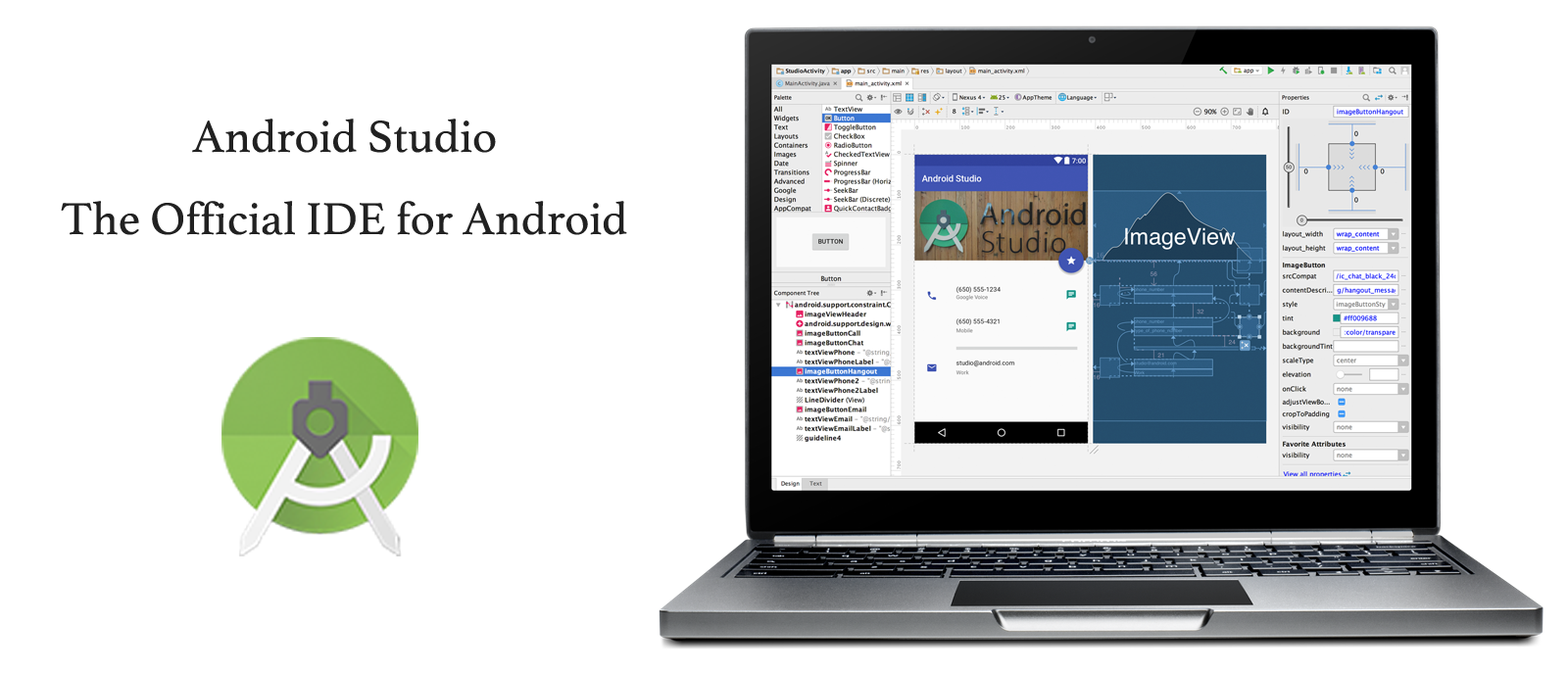
<style>
.page{position:relative;width:1568px;height:674px;background:#ffffff}
.page>*{position:absolute;margin:0}
.t1{font:47px "Athelas-Regular";color:#212121}
</style>
<div class="page">
<p class="t1" style="left:61px;top:119px;width:566px;height:116px;text-align:center">Android Studio<br>The Official IDE for Android</p>
</div>
